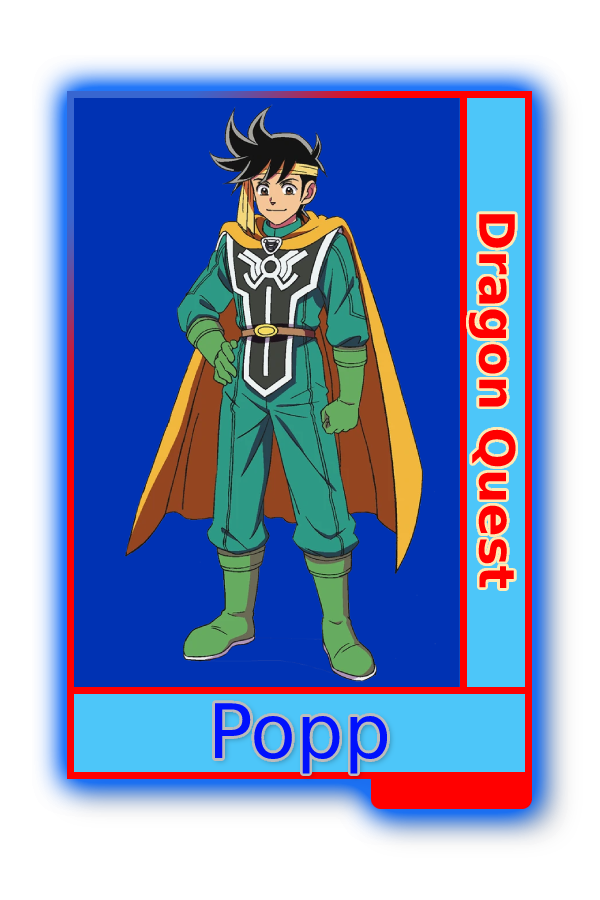
<style>
.page{position:relative;width:600px;height:900px;background:#0032b3}
.page>*{position:absolute;margin:0}
.t1{font:48.8px "MADETOMMY-Bold";color:#ff0000}
.t2{font:75px "CoolveticaRg-Regular";color:#0011fd}
</style>
<div class="page">
<p class="t1" style="left:468px;top:214px;width:48px;height:374px;rotate:90deg">Dragon Quest</p>
<p class="t2" style="left:214px;top:703px;width:174px;height:71px">Popp</p>
</div>
